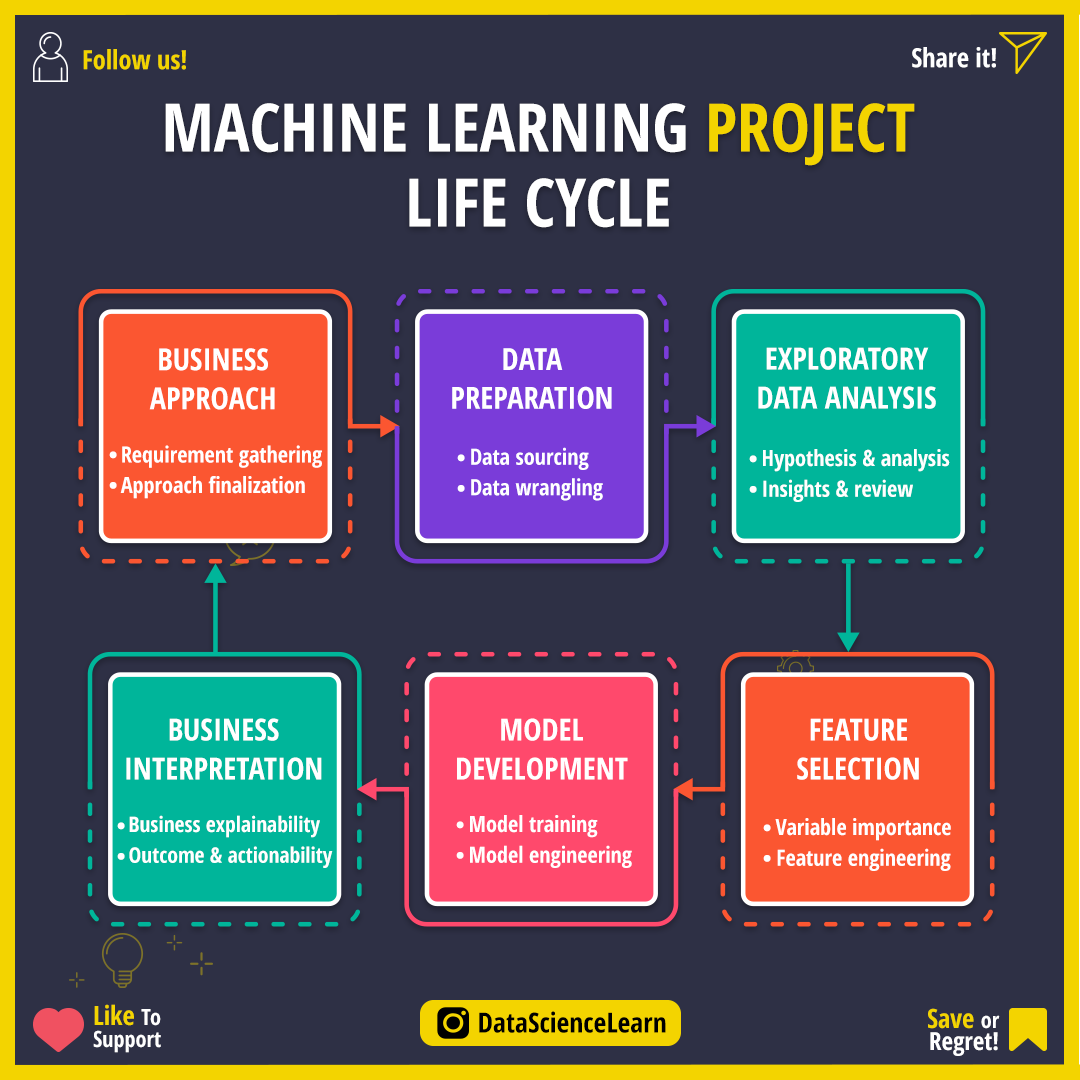
<style>
.page{position:relative;width:1080px;height:1080px;background:#2e3045}
.page>*{position:absolute;margin:0}
.t1{font:26.4px "OpenSans-CondensedBold";color:#f3d400}
.t2{font:26.4px "OpenSans-CondensedBold";color:#ffffff}
.t3{font:66.7px/75px "OpenSans-CondensedBold";color:#ffffff}
.t4{font:66.7px/75px "OpenSans-CondensedBold";color:#f3d400}
.t5{font:30.6px/38.9px "OpenSans-CondensedBold";color:#ffffff}
.t6{font:22.2px/30.6px "OpenSans-CondensedBold";color:#ffffff}
.t7{font:41.7px/30.6px "OpenSans-CondensedBold";color:#ffffff}
.t8{font:21.5px/30.6px "OpenSans-CondensedBold";color:#ffffff}
.t9{font:22.2px/22.2px "OpenSans-CondensedBold";color:#ffffff}
.t10{font:26.4px/22.2px "OpenSans-CondensedBold";color:#f3d400}
.t11{font:27.8px "OpenSans-CondensedBold";color:#000000}
.t12{font:25px/22.2px "OpenSans-CondensedBold";color:#ffffff}
</style>
<div class="page">
<p class="t1" style="left:83px;top:49px;width:103px;height:21px">Follow us!</p>
<p class="t2" style="left:912px;top:47px;width:84px;height:21px">Share it!</p>
<p class="t3" style="left:165px;top:103px;width:750px;height:125px;text-align:center">MACHINE LEARNING<span class="t4"> PROJECT<br></span>LIFE CYCLE</p>
<p class="t5" style="left:149px;top:348px;width:126px;height:62px;text-align:center">BUSINESS<br>APPROACH</p>
<p class="t5" style="left:452px;top:348px;width:160px;height:61px;text-align:center">DATA<br>PREPARATION</p>
<p class="t5" style="left:758px;top:347px;width:178px;height:62px;text-align:center">EXPLORATORY<br>DATA ANALYSIS</p>
<p class="t6" style="left:120px;top:445px;width:202px;height:54px">Requirement gathering<br>Approach finalization</p>
<p class="t6" style="left:471px;top:447px;width:132px;height:54px">Data sourcing<br>Data wrangling</p>
<p class="t6" style="left:763px;top:449px;width:187px;height:53px">Hypothesis &amp; analysis<br>Insights &amp; review</p>
<p class="t7" style="left:109px;top:451px;width:8px;height:38px">.<br>.</p>
<p class="t7" style="left:457px;top:454px;width:8px;height:38px">.<br>.</p>
<p class="t7" style="left:749px;top:455px;width:8px;height:38px">.<br>.</p>
<p class="t5" style="left:126px;top:718px;width:196px;height:62px;text-align:center">BUSINESS<br>INTERPRETATION</p>
<p class="t5" style="left:457px;top:718px;width:171px;height:62px;text-align:center">MODEL<br>DEVELOPMENT</p>
<p class="t5" style="left:797px;top:718px;width:122px;height:62px;text-align:center">FEATURE<br>SELECTION</p>
<p class="t7" style="left:117px;top:822px;width:8px;height:38px">.<br>.</p>
<p class="t8" style="left:129px;top:815px;width:204px;height:53px">Business explainability<br>Outcome &amp; actionability</p>
<p class="t7" style="left:456px;top:821px;width:8px;height:38px">.<br>.</p>
<p class="t6" style="left:470px;top:815px;width:162px;height:53px">Model training<br>Model engineering</p>
<p class="t6" style="left:775px;top:818px;width:176px;height:53px;text-align:center">Variable importance<br>Feature engineering</p>
<p class="t7" style="left:763px;top:824px;width:8px;height:38px">.<br>.</p>
<p class="t9" style="left:93px;top:1004px;width:68px;height:49px"><span class="t10">Like </span>To<br>Support</p>
<p class="t11" style="left:479px;top:1011px;width:187px;height:22px">DataScienceLearn</p>
<p class="t12" style="left:928px;top:1008px;width:72px;height:48px;text-align:right"><span class="t10">Save </span><span class="t9">or<br></span>Regret!</p>
</div>
